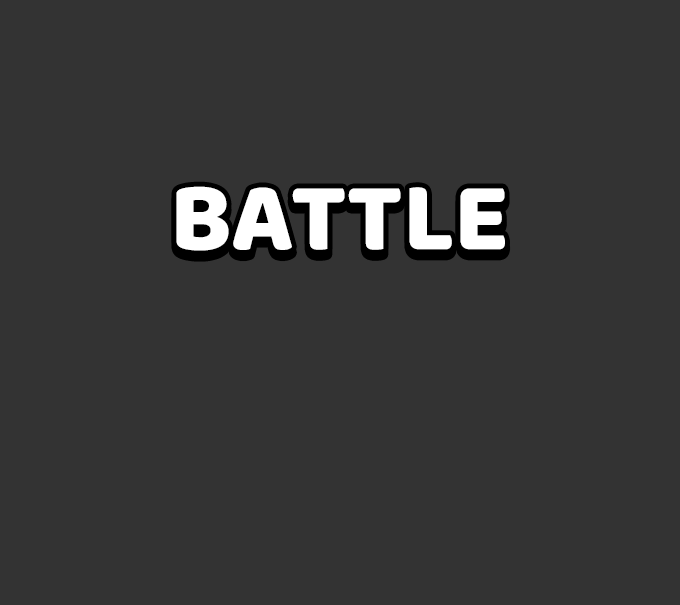
<style>
.page{position:relative;width:680px;height:605px;background:#333333}
.page>*{position:absolute;margin:0}
.t1{font:100px "Baloo2-ExtraBold";color:#ffffff}
</style>
<div class="page">
<p class="t1" style="left:176px;top:186px;width:329px;height:65px">BATTLE</p>
</div>
